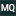
<style>
.page{position:relative;width:16px;height:16px;background:#112d2d}
.page>*{position:absolute;margin:0}
.t1{font:8.9px "Roboto-Regular";letter-spacing:0.015em;color:#fff9f9}
</style>
<div class="page">
<p class="t1" style="left:1px;top:4px;width:14px;height:8px">MQ</p>
</div>
